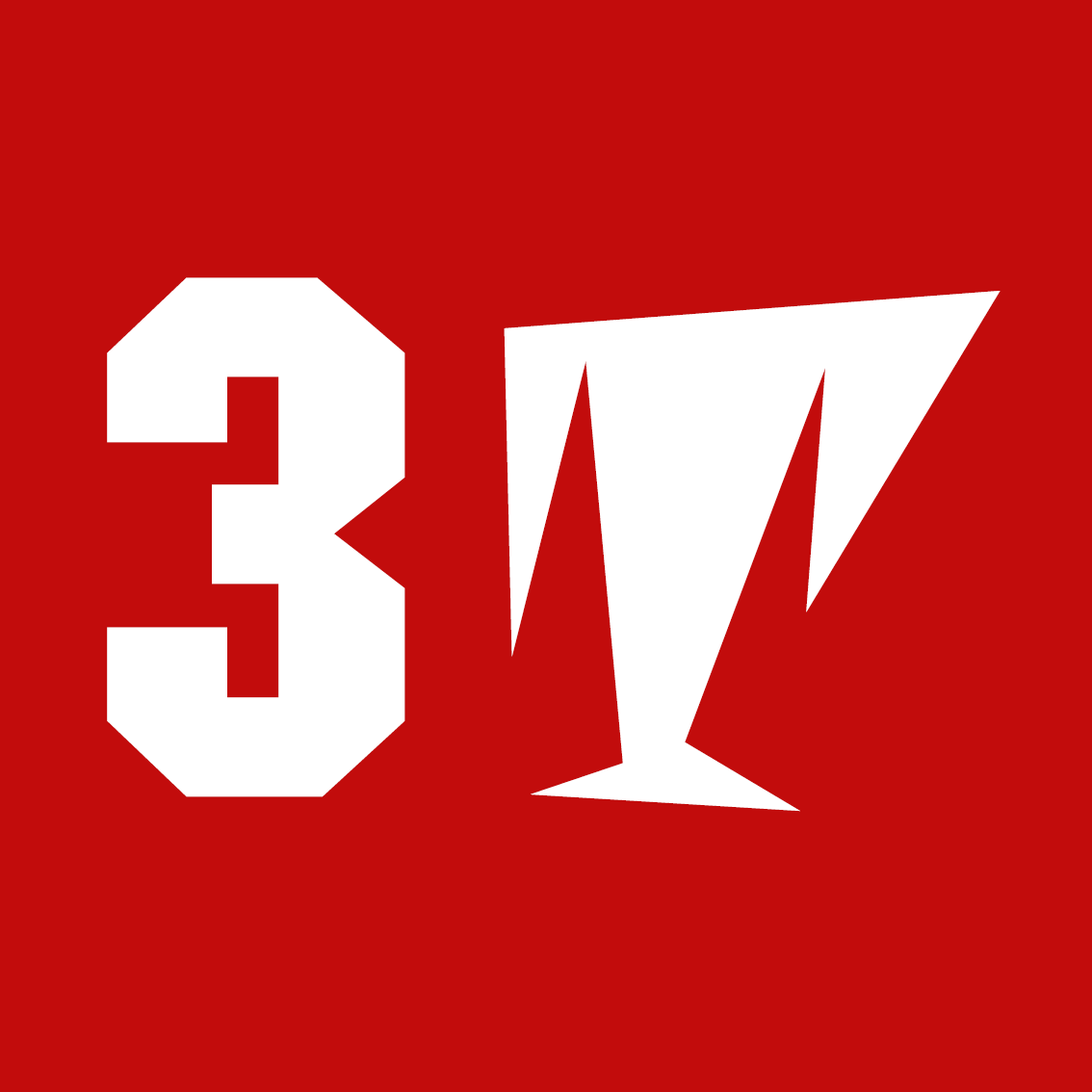
<style>
.page{position:relative;width:1092px;height:1092px;background:#c20c0c}
.page>*{position:absolute;margin:0}
.t1{font:741.2px "MaccaroniNormal";color:#ffffff;scale:1.05 1}
.t2{font:693.3px "SnapITC-Regular";color:#ffffff;font-style:italic;scale:0.88 1}
</style>
<div class="page">
<p class="t1" style="left:107px;top:277px;width:894px;height:535px">3<span class="t2">T</span></p>
</div>
